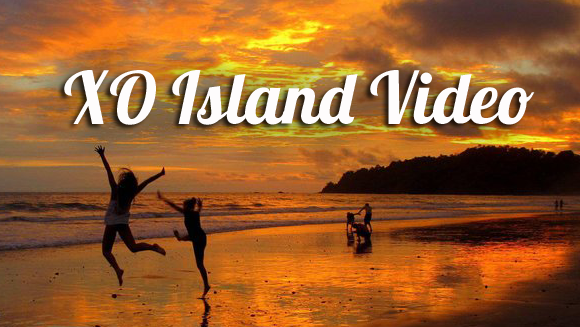
<style>
.page{position:relative;width:580px;height:327px}
.page>*{position:absolute;margin:0}
.t1{font:72px "Lobster1.4";color:#fefcfc}
</style>
<div class="page">
<p class="t1" style="left:64px;top:70px;width:471px;height:55px">XO Island Video</p>
</div>
